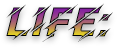
<style>
.page{position:relative;width:120px;height:52px;background:#ffffff}
.page>*{position:absolute;margin:0}
.t1{font:39.7px "Facon"}
</style>
<div class="page">
<p class="t1" style="left:6px;top:3px;width:107px;height:39px">Life:</p>
</div>
